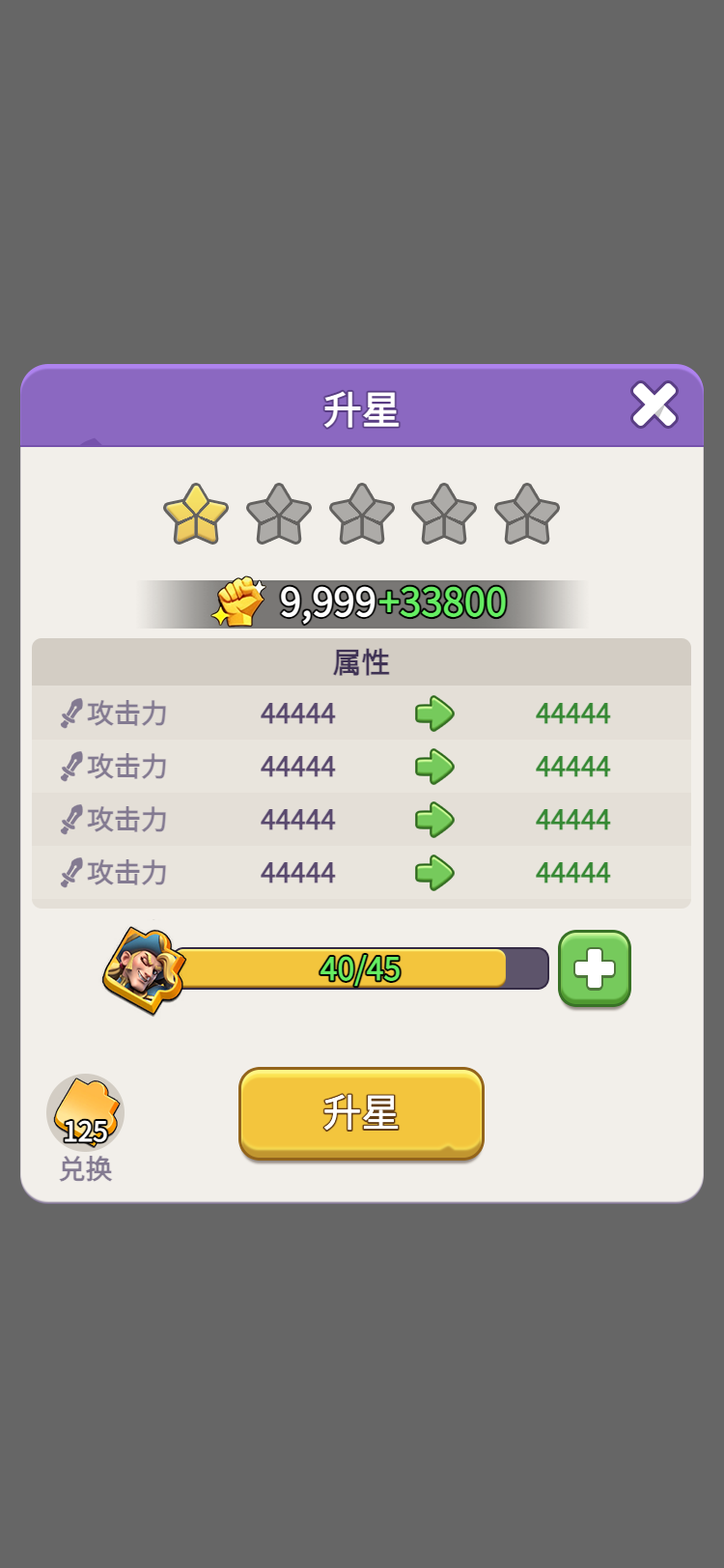
<style>
.page{position:relative;width:724px;height:1568px;background:#666666}
.page>*{position:absolute;margin:0}
.t1{font:38.6px "WebPSD-18463539-0-Regular";color:#ffffff;font-weight:bold}
.t2{font:38.6px "WebPSD-18463539-0-Regular";color:#65ee62;font-weight:bold}
.t3{font:29px "WebPSD-18463539-0-Regular";color:#3f3254;font-weight:bold}
.t4{font:27px "WebPSD-18463539-0-Regular";color:#837a91;font-weight:bold}
.t5{font:27px "WebPSD-18463539-0-Regular";color:#59496e;font-weight:bold}
.t6{font:27px "WebPSD-18463539-0-Regular";color:#368934;font-weight:bold}
.t7{font:38.6px/38.6px "WebPSD-18463539-0-Regular";color:#ffffff}
.t8{font:27px "WebPSD-18463539-0-Regular";color:#ffffff;font-weight:bold}
</style>
<div class="page">
<p class="t1" style="left:107px;top:381px;width:510px;height:56px">升星</p>
<p class="t1" style="left:272px;top:575px;width:106px;height:54px">9,999</p>
<p class="t2" style="left:377px;top:575px;width:141px;height:54px">+33800</p>
<p class="t3" style="left:32px;top:638px;width:659px;height:48px">属性</p>
<p class="t4" style="left:87px;top:696px;width:154px;height:35px">攻击力</p>
<p class="t5" style="left:261px;top:696px;width:135px;height:35px">44444</p>
<p class="t6" style="left:536px;top:696px;width:135px;height:35px">44444</p>
<p class="t4" style="left:87px;top:749px;width:154px;height:35px">攻击力</p>
<p class="t5" style="left:261px;top:749px;width:135px;height:35px">44444</p>
<p class="t6" style="left:536px;top:749px;width:135px;height:35px">44444</p>
<p class="t4" style="left:87px;top:802px;width:154px;height:35px">攻击力</p>
<p class="t5" style="left:261px;top:802px;width:135px;height:35px">44444</p>
<p class="t6" style="left:536px;top:802px;width:135px;height:35px">44444</p>
<p class="t4" style="left:87px;top:855px;width:154px;height:35px">攻击力</p>
<p class="t5" style="left:261px;top:855px;width:135px;height:35px">44444</p>
<p class="t6" style="left:536px;top:855px;width:135px;height:35px">44444</p>
<p class="t7" style="left:246px;top:1071px;width:231px;height:83px;text-align:center">升星</p>
<p class="t8" style="left:46px;top:1116px;width:79px;height:31px">125</p>
<p class="t4" style="left:46px;top:1154px;width:79px;height:31px">兑换</p>
</div>
